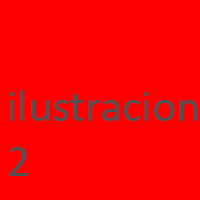
<style>
.page{position:relative;width:200px;height:200px;background:#ff0000}
.page>*{position:absolute;margin:0}
.t1{font:46px "Calibri";color:#4f5155}
</style>
<div class="page">
<p class="t1" style="left:9px;top:90px;width:188px;height:86px">ilustracion<br>2</p>
</div>
